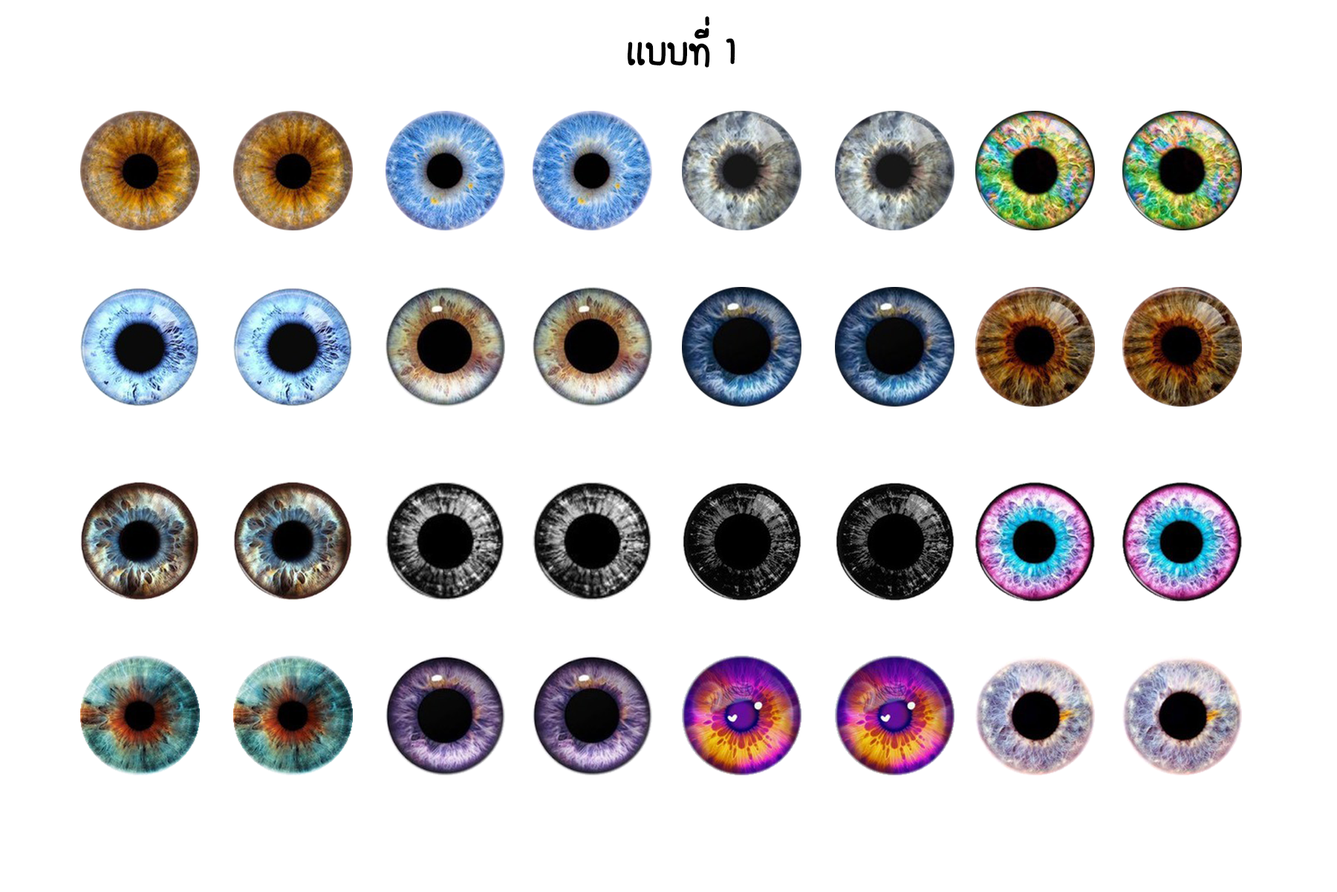
<style>
.page{position:relative;width:1337px;height:892px;background:#ffffff}
.page>*{position:absolute;margin:0}
.t1{font:55.7px "FCDaisyRegular";color:#000000}
</style>
<div class="page">
<p class="t1" style="left:627px;top:16px;width:109px;height:52px">เเบบที่ 1</p>
</div>
